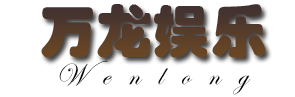
<style>
.page{position:relative;width:295px;height:97px;background:#ffffff}
.page>*{position:absolute;margin:0}
.t1{font:57px "STHupo";color:#563c2a}
.t2{font:31px "EdwardianScriptITC";letter-spacing:0.58em;color:#050505}
</style>
<div class="page">
<p class="t1" style="left:41px;top:4px;width:225px;height:54px">万龙娱乐</p>
<p class="t2" style="left:59px;top:60px;width:192px;height:35px">Wenlong</p>
</div>
